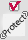
<style>
.page{position:relative;width:28px;height:40px;background:#f2f2f2}
.page>*{position:absolute;margin:0}
.t1{font:9px "SegoeUI"}
</style>
<div class="page">
<p class="t1" style="left:2px;top:14px;width:25px;height:23px;rotate:-43deg">Protect</p>
</div>
